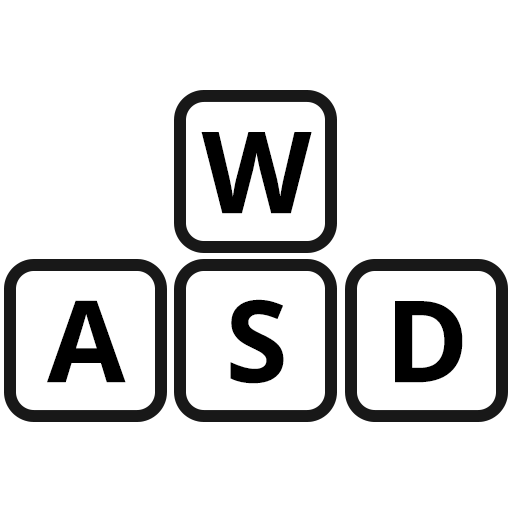
<style>
.page{position:relative;width:512px;height:512px;background:#ffffff}
.page>*{position:absolute;margin:0}
.t1{font:113.5px "OpenSans-Bold";color:#000000}
</style>
<div class="page">
<p class="t1" style="left:201px;top:132px;width:111px;height:82px">W</p>
<p class="t1" style="left:47px;top:300px;width:79px;height:83px">A</p>
<p class="t1" style="left:230px;top:299px;width:54px;height:85px">S</p>
<p class="t1" style="left:395px;top:301px;width:68px;height:82px">D</p>
</div>
